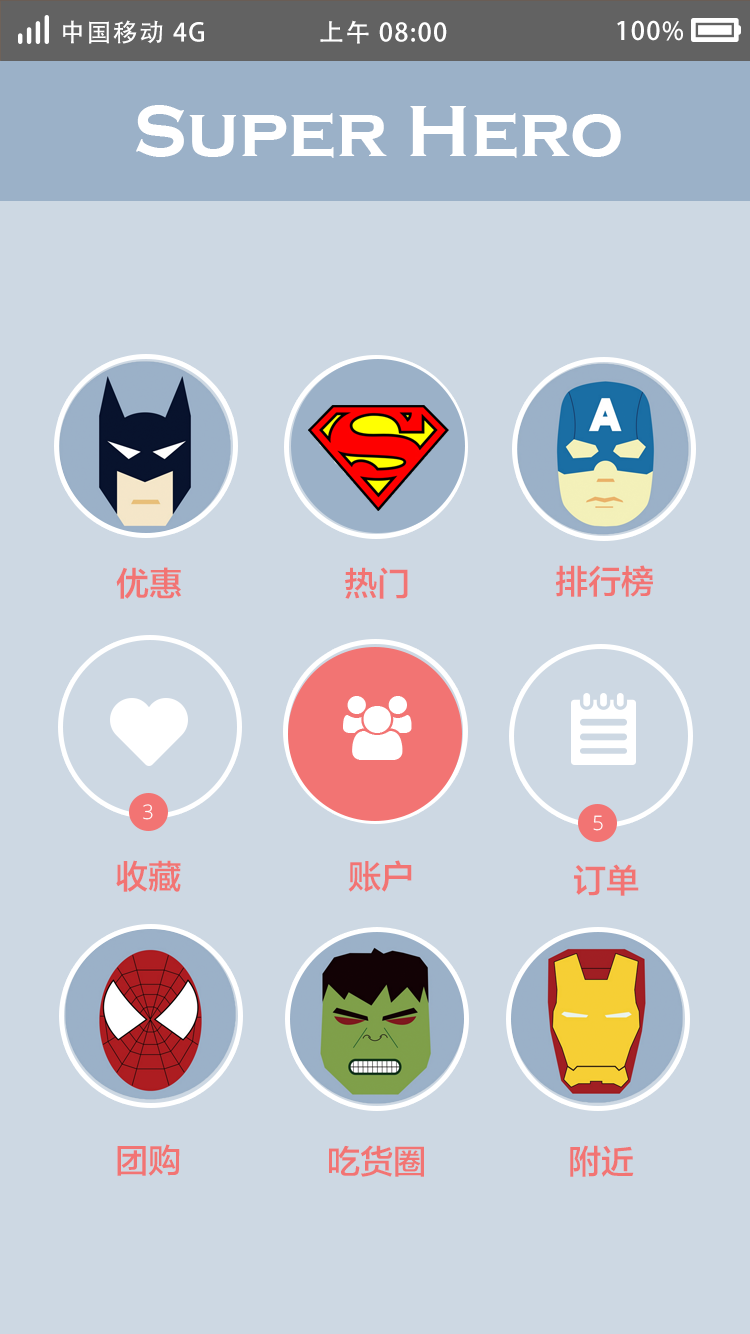
<style>
.page{position:relative;width:750px;height:1334px;background:#cdd8e3}
.page>*{position:absolute;margin:0}
.t1{font:25px "AdobeHeitiStd-Regular";letter-spacing:0.06em;color:#ffffff}
.t2{font:75px "CopperplateGothic-Bold";color:#ffffff}
.t3{font:33.3px "FZLTZHK--GBK1-0";color:#f27473}
.t4{font:33.3px "FZLTZHK--GBK1-0";color:#f27473;text-transform:uppercase}
.t5{font:20px "OpenSans-Light";color:#ffffff}
</style>
<div class="page">
<p class="t1" style="left:63px;top:20px;width:141px;height:24px">中国移动 4G</p>
<p class="t1" style="left:320px;top:20px;width:127px;height:24px">上午 08:00</p>
<p class="t1" style="left:617px;top:20px;width:66px;height:21px">100%</p>
<p class="t2" style="left:136px;top:105px;width:485px;height:53px">Super Hero</p>
<p class="t3" style="left:116px;top:567px;width:66px;height:32px">优惠</p>
<p class="t3" style="left:345px;top:567px;width:63px;height:32px">热门</p>
<p class="t4" style="left:556px;top:565px;width:97px;height:32px">排行榜</p>
<p class="t5" style="left:143px;top:804px;width:10px;height:16px">3</p>
<p class="t5" style="left:593px;top:815px;width:10px;height:16px">5</p>
<p class="t4" style="left:116px;top:860px;width:65px;height:32px">收藏</p>
<p class="t4" style="left:348px;top:860px;width:64px;height:32px">账户</p>
<p class="t4" style="left:574px;top:864px;width:65px;height:32px">订单</p>
<p class="t4" style="left:117px;top:1144px;width:63px;height:32px">团购</p>
<p class="t4" style="left:329px;top:1145px;width:95px;height:32px">吃货圈</p>
<p class="t3" style="left:570px;top:1145px;width:64px;height:32px">附近</p>
</div>
